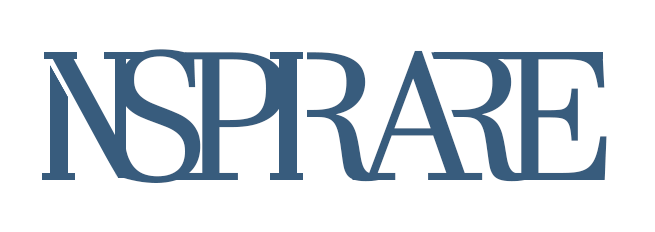
<style>
.page{position:relative;width:655px;height:232px;background:#ffffff}
.page>*{position:absolute;margin:0}
.t1{font:179.8px "JavaneseText";color:#385c7d}
.t2{font:179.9px "JavaneseText";color:#385c7d}
</style>
<div class="page">
<p class="t1" style="left:118px;top:49px;width:83px;height:134px">S</p>
<p class="t2" style="left:184px;top:52px;width:101px;height:128px">P</p>
<p class="t2" style="left:266px;top:52px;width:113px;height:130px">R</p>
<p class="t2" style="left:352px;top:50px;width:131px;height:130px">A</p>
<p class="t2" style="left:412px;top:52px;width:113px;height:130px">R</p>
<p class="t2" style="left:503px;top:52px;width:104px;height:128px">E</p>
</div>
